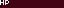
<style>
.page{position:relative;width:64px;height:8px;background:#450414}
.page>*{position:absolute;margin:0}
.t1{font:7.5px "04b03";color:#ffffff}
</style>
<div class="page">
<p class="t1" style="left:0px;top:0px;width:9px;height:5px">HP</p>
</div>
